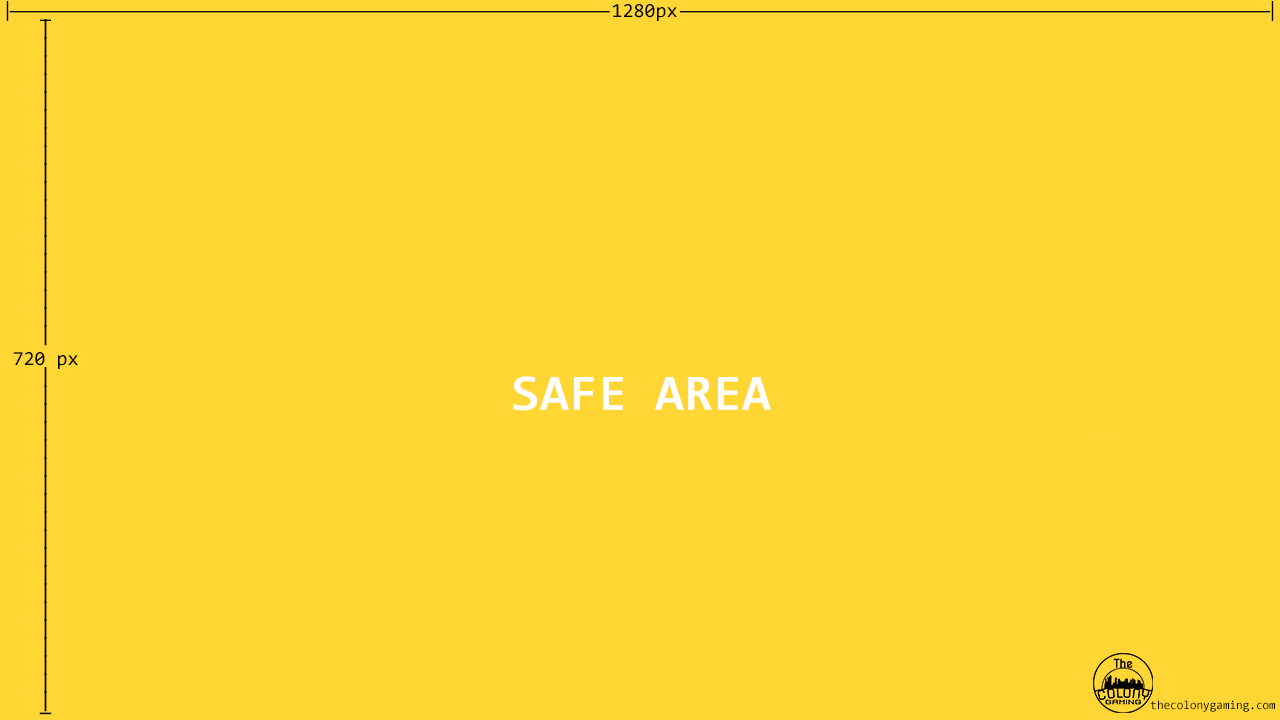
<style>
.page{position:relative;width:1280px;height:720px;background:#ffd633}
.page>*{position:absolute;margin:0}
.t1{font:20px "Consolas";letter-spacing:-0.3em;color:#000000}
.t2{font:20px "Consolas";color:#000000}
.t3{font:20px/18px "Consolas";color:#000000;font-weight:bold}
.t4{font:20px/3px "Consolas";color:#000000;font-weight:bold}
.t5{font:50px "Consolas";color:#ffffff;font-weight:bold}
.t6{font:12px "Consolas";color:#000000}
</style>
<div class="page">
<p class="t1" style="left:6px;top:1px;width:1268px;height:20px">|------------------------------------------------------------------------------------------------------------------------ <span class="t2">1280px</span>----------------------------------------------------------------------------------------------------------------------|</p>
<p class="t3" style="left:13px;top:19px;width:65px;height:696px;text-align:center"><span class="t2">_<br></span>|<br>|<br>|<br>|<br>|<br>|<br>|<br>|<br>|<br>|<br>|<br>|<br>|<br>|<br>|<br>|<br>|<br>|<br><span class="t2">720 px</span><br>|<br>|<br>|<br>|<br>|<br>|<br>|<br>|<br>|<br>|<br>|<br>|<br>|<br>|<br>|<br>|<br>|<br>|<br>|<br><span class="t4">_</span></p>
<p class="t5" style="left:513px;top:376px;width:258px;height:35px">SAFE AREA</p>
<p class="t6" style="left:1150px;top:700px;width:125px;height:12px">thecolonygaming.com</p>
</div>
